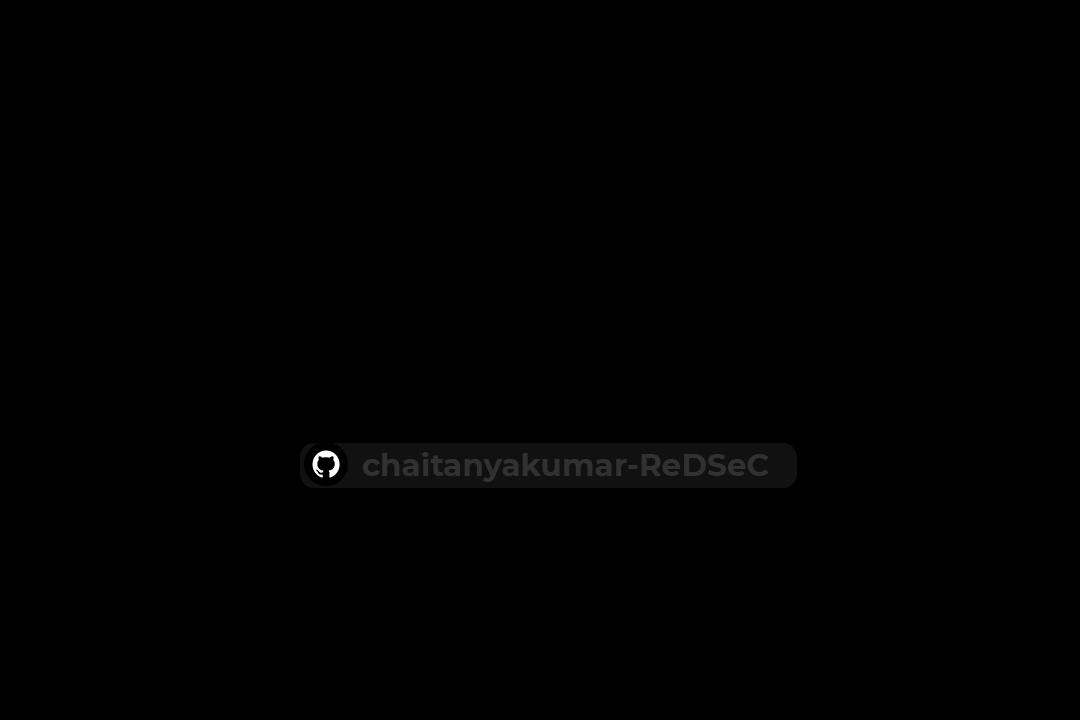
<style>
.page{position:relative;width:1080px;height:720px;background:#000000}
.page>*{position:absolute;margin:0}
.t1{font:30.8px "Montserrat-Bold";color:#323030}
</style>
<div class="page">
<p class="t1" style="left:363px;top:452px;width:406px;height:30px">chaitanyakumar-ReDSeC</p>
</div>
